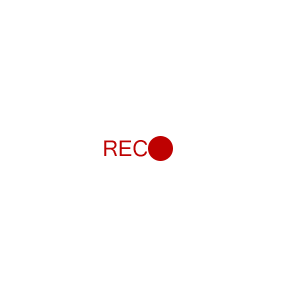
<style>
.page{position:relative;width:283px;height:283px;background:#ffffff}
.page>*{position:absolute;margin:0}
.t1{font:24px "Raavi";color:#be0101}
</style>
<div class="page">
<p class="t1" style="left:104px;top:140px;width:43px;height:17px">REC</p>
</div>
